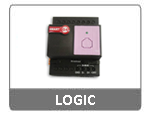
<style>
.page{position:relative;width:150px;height:115px;background:#ffffff}
.page>*{position:absolute;margin:0}
.t1{font:16px "Calibri-Bold";color:#fefdfd;text-transform:uppercase}
</style>
<div class="page">
<p class="t1" style="left:56px;top:95px;width:39px;height:10px">LOGIC</p>
</div>
